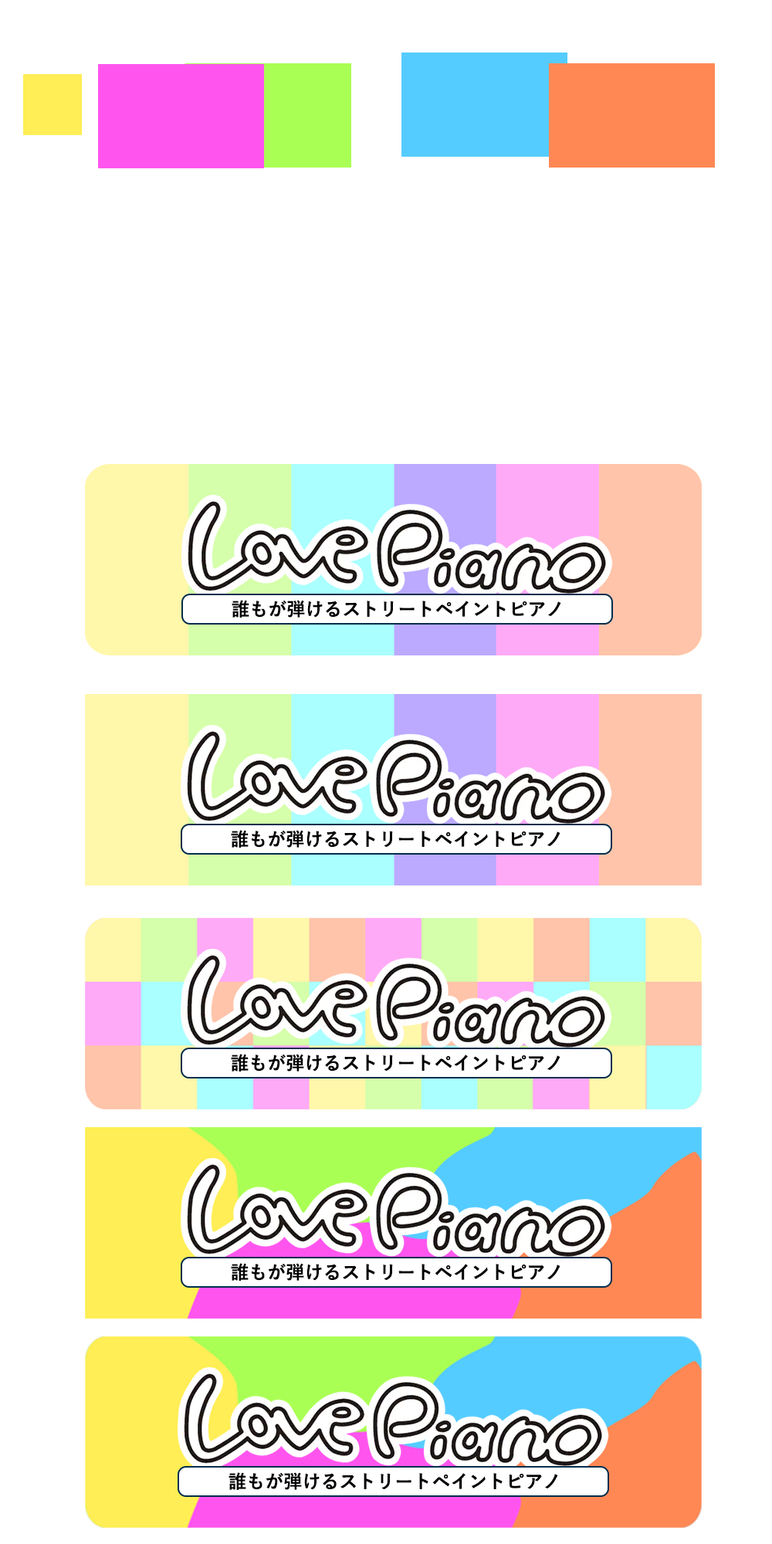
<style>
.page{position:relative;width:772px;height:1544px;background:#ffffff}
.page>*{position:absolute;margin:0}
.t1{font:18.5px "YuGo-Bold";color:#010101}
</style>
<div class="page">
<p class="t1" style="left:232px;top:600px;width:329px;height:18px">誰もが弾けるストリートペイントピアノ</p>
<p class="t1" style="left:231px;top:830px;width:330px;height:18px">誰もが弾けるストリートペイントピアノ</p>
<p class="t1" style="left:231px;top:1054px;width:330px;height:18px">誰もが弾けるストリートペイントピアノ</p>
<p class="t1" style="left:231px;top:1263px;width:330px;height:18px">誰もが弾けるストリートペイントピアノ</p>
<p class="t1" style="left:229px;top:1472px;width:329px;height:18px">誰もが弾けるストリートペイントピアノ</p>
</div>
